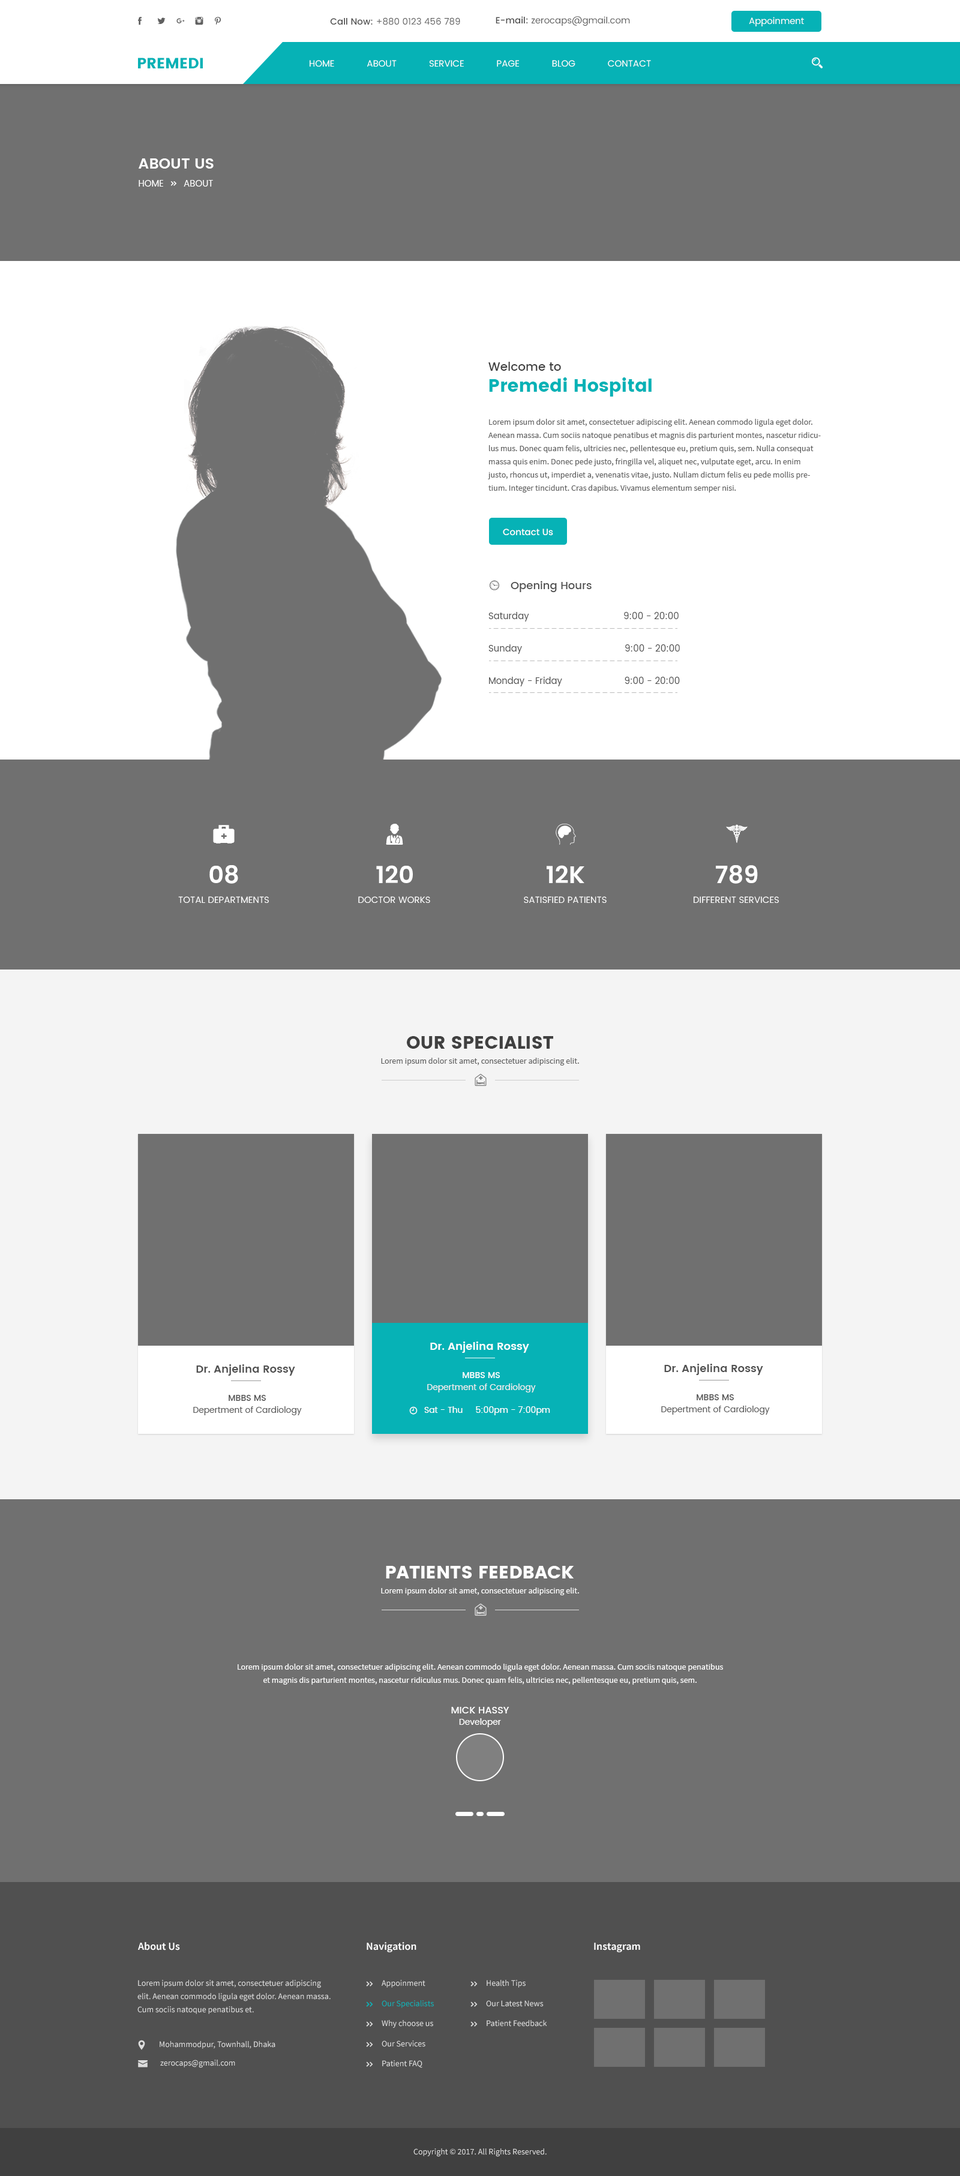
<style>
.page{position:relative;width:960px;height:2176px;background:#707070}
.page>*{position:absolute;margin:0}
.t1{font:9px "Poppins-Regular";color:#606060}
.t2{font:9px "Poppins-Medium";color:#505050}
.t3{font:9px "Poppins-Regular";color:#fffefe}
.t4{font:15px "Poppins";color:#06b2b6}
.t5{font:9px "Poppins-Regular";color:#ffffff}
.t6{font:15px "Poppins-SemiBold";color:#ffffff}
.t7{font:18px/21px "Poppins";color:#06b2b6}
.t8{font:12px/21px "Poppins-Medium";color:#404040}
.t9{font:8.4px/13.2px "SourceSansPro-Regular";color:#606060}
.t10{font:9px "Poppins-Medium";color:#fefefe}
.t11{font:9px "Poppins-Regular";color:#505050}
.t12{font:24px "Poppins-SemiBold";color:#ffffff}
.t13{font:18px "Poppins";color:#404040;text-transform:uppercase}
.t14{font:8.4px "SourceSansPro-Regular";color:#606060}
.t15{font:10.8px "Poppins-SemiBold";color:#ffffff}
.t16{font:10.8px "Poppins-SemiBold";color:#505050}
.t17{font:8.4px/12px "Poppins-Regular";color:#eeeeee}
.t18{font:8.4px/12px "Poppins-Medium";color:#ffffff}
.t19{font:8.4px/12px "Poppins-Regular";color:#606060}
.t20{font:8.4px/12px "Poppins-Medium";color:#505050}
.t21{font:8.4px "Poppins-Regular";color:#ffffff}
.t22{font:18px "Poppins";color:#ffffff;text-transform:uppercase}
.t23{font:8.4px "SourceSansPro-Regular";color:#ffffff}
.t24{font:8.4px/13.2px "SourceSansPro-Regular";color:#ffffff}
.t25{font:9.6px "Poppins-Medium";color:#ffffff;text-transform:uppercase}
.t26{font:10.8px "SourceSansPro-Semibold";color:#ffffff}
.t27{font:8.4px/13.2px "SourceSansPro-Regular";color:#dddddd}
.t28{font:8.4px "SourceSansPro-Regular";color:#dddddd}
.t29{font:8.4px "SourceSansPro-Regular";color:#06b2b6}
</style>
<div class="page">
<p class="t1" style="left:330px;top:17px;width:130px;height:8px"><span class="t2">Call Now: </span>+880 0123 456 789</p>
<p class="t1" style="left:496px;top:16px;width:134px;height:10px"><span class="t2">E-mail: </span>zerocaps@gmail.com</p>
<p class="t3" style="left:749px;top:17px;width:55px;height:9px">Appoinment</p>
<p class="t4" style="left:138px;top:58px;width:65px;height:10px">PREMEDI</p>
<p class="t5" style="left:310px;top:60px;width:341px;height:7px">HOME            ABOUT            SERVICE            PAGE            BLOG            CONTACT</p>
<p class="t6" style="left:139px;top:158px;width:75px;height:11px">ABOUT US</p>
<p class="t7" style="left:488px;top:362px;width:164px;height:35px"><span class="t8">Welcome to <br></span>Premedi Hospital</p>
<p class="t9" style="left:488px;top:419px;width:333px;height:74px">Lorem ipsum dolor sit amet, consectetuer adipiscing elit. Aenean commodo ligula eget dolor. Aenean massa. Cum sociis natoque penatibus et magnis dis parturient montes, nascetur ridiculus mus. Donec quam felis, ultricies nec, pellentesque eu, pretium quis, sem. Nulla consequat massa quis enim. Donec pede justo, fringilla vel, aliquet nec, vulputate eget, arcu. In enim justo, rhoncus ut, imperdiet a, venenatis vitae, justo. Nullam dictum felis eu pede mollis pretium. Integer tincidunt. Cras dapibus. Vivamus elementum semper nisi.</p>
<p class="t10" style="left:503px;top:529px;width:50px;height:7px">Contact Us</p>
<p class="t11" style="left:488px;top:612px;width:191px;height:10px">Saturday                                   9:00 - 20:00</p>
<p class="t11" style="left:488px;top:644px;width:192px;height:10px">Sunday                                      9:00 - 20:00</p>
<p class="t11" style="left:489px;top:677px;width:191px;height:9px">Monday - Friday                       9:00 - 20:00</p>
<p class="t12" style="left:209px;top:865px;width:29px;height:19px">08</p>
<p class="t12" style="left:376px;top:865px;width:37px;height:18px">120</p>
<p class="t12" style="left:547px;top:865px;width:37px;height:18px">12K</p>
<p class="t12" style="left:716px;top:865px;width:42px;height:19px">789</p>
<p class="t5" style="left:178px;top:896px;width:91px;height:7px">TOTAL DEPARTMENTS</p>
<p class="t5" style="left:358px;top:896px;width:72px;height:7px">DOCTOR WORKS</p>
<p class="t5" style="left:524px;top:896px;width:83px;height:7px">SATISFIED PATIENTS</p>
<p class="t5" style="left:694px;top:896px;width:85px;height:7px">DIFFERENT SERVICES</p>
<p class="t13" style="left:407px;top:1036px;width:146px;height:13px">our specialist</p>
<p class="t14" style="left:381px;top:1058px;width:198px;height:8px">Lorem ipsum dolor sit amet, consectetuer adipiscing elit.</p>
<p class="t15" style="left:430px;top:1342px;width:99px;height:11px">Dr. Anjelina Rossy</p>
<p class="t16" style="left:196px;top:1364px;width:99px;height:12px">Dr. Anjelina Rossy</p>
<p class="t17" style="left:427px;top:1372px;width:109px;height:21px;text-align:center"><span class="t18">MBBS MS<br></span>Depertment of Cardiology</p>
<p class="t16" style="left:664px;top:1364px;width:99px;height:11px">Dr. Anjelina Rossy</p>
<p class="t19" style="left:193px;top:1395px;width:109px;height:20px;text-align:center"><span class="t20">MBBS MS<br></span>Depertment of Cardiology</p>
<p class="t19" style="left:661px;top:1394px;width:109px;height:21px;text-align:center"><span class="t20">MBBS MS<br></span>Depertment of Cardiology</p>
<p class="t21" style="left:424px;top:1406px;width:126px;height:9px">Sat - Thu     5:00pm - 7:00pm</p>
<p class="t22" style="left:386px;top:1566px;width:188px;height:13px">patients feedback</p>
<p class="t23" style="left:381px;top:1588px;width:198px;height:7px">Lorem ipsum dolor sit amet, consectetuer adipiscing elit.</p>
<p class="t24" style="left:238px;top:1664px;width:485px;height:21px;text-align:center">Lorem ipsum dolor sit amet, consectetuer adipiscing elit. Aenean commodo ligula eget dolor. Aenean massa. Cum sociis natoque penatibus et magnis dis parturient montes, nascetur ridiculus mus. Donec quam felis, ultricies nec, pellentesque eu, pretium quis, sem.</p>
<p class="t25" style="left:451px;top:1707px;width:58px;height:7px">Mick Hassy</p>
<p class="t21" style="left:459px;top:1718px;width:42px;height:9px">Developer</p>
<p class="t26" style="left:138px;top:1942px;width:42px;height:9px">About Us</p>
<p class="t26" style="left:367px;top:1942px;width:49px;height:10px">Navigation</p>
<p class="t26" style="left:594px;top:1943px;width:46px;height:9px">Instagram</p>
<p class="t27" style="left:137px;top:1980px;width:194px;height:34px">Lorem ipsum dolor sit amet, consectetuer adipiscing elit. Aenean commodo ligula eget dolor. Aenean massa. Cum sociis natoque penatibus et.</p>
<p class="t28" style="left:382px;top:1980px;width:43px;height:8px">Appoinment</p>
<p class="t28" style="left:487px;top:1980px;width:39px;height:8px">Health Tips</p>
<p class="t29" style="left:382px;top:2000px;width:52px;height:8px">Our Specialists</p>
<p class="t28" style="left:486px;top:2000px;width:58px;height:7px">Our Latest News</p>
<p class="t28" style="left:382px;top:2020px;width:51px;height:8px">Why choose us</p>
<p class="t28" style="left:487px;top:2020px;width:60px;height:7px">Patient Feedback</p>
<p class="t28" style="left:160px;top:2041px;width:115px;height:8px">Mohammodpur, Townhall, Dhaka</p>
<p class="t28" style="left:382px;top:2041px;width:43px;height:6px">Our Services</p>
<p class="t28" style="left:160px;top:2060px;width:75px;height:8px">zerocaps@gmail.com</p>
<p class="t28" style="left:382px;top:2060px;width:40px;height:8px">Patient FAQ</p>
<p class="t28" style="left:413px;top:2149px;width:134px;height:8px">Copyright © 2017. All Rights Reserved.</p>
</div>
